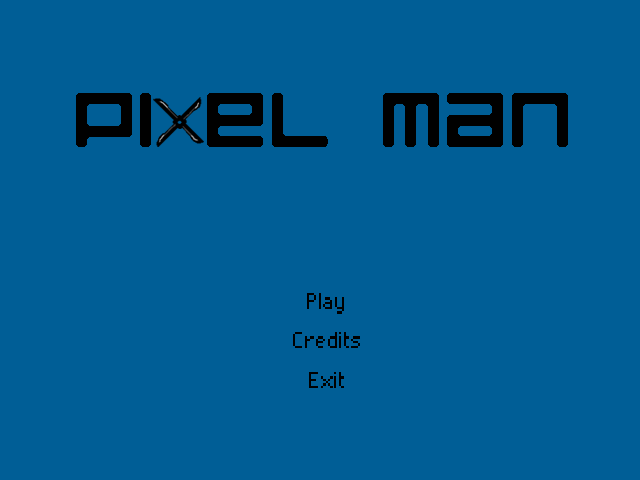
<style>
.page{position:relative;width:640px;height:480px;background:#005e96}
.page>*{position:absolute;margin:0}
.t1{font:100px "LuggageRoundRegular";color:#000000}
.t2{font:30px "Pixelade";color:#000000}
</style>
<div class="page">
<p class="t1" style="left:76px;top:93px;width:492px;height:54px">Pi el Man</p>
<p class="t2" style="left:307px;top:293px;width:37px;height:21px">Play</p>
<p class="t2" style="left:293px;top:332px;width:67px;height:16px">Credits</p>
<p class="t2" style="left:309px;top:372px;width:35px;height:16px">Exit</p>
</div>
